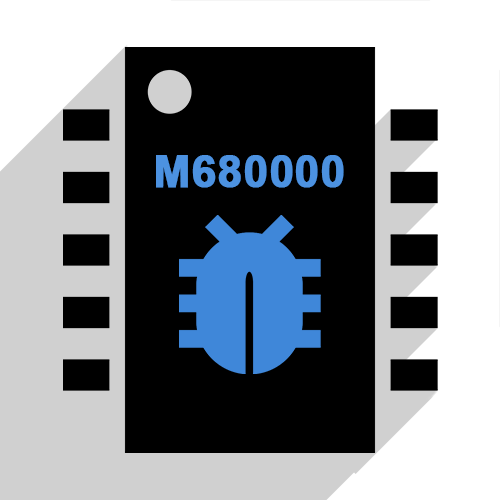
<style>
.page{position:relative;width:500px;height:500px;background:#000000}
.page>*{position:absolute;margin:0}
.t1{font:44.1px "Arial-BoldMT";color:#4c92e1;font-weight:bold}
</style>
<div class="page">
<p class="t1" style="left:156px;top:155px;width:188px;height:33px">M680000</p>
</div>
